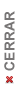
<style>
.page{position:relative;width:18px;height:90px;background:#ffffff}
.page>*{position:absolute;margin:0}
.t1{font:14px "Arial-BoldMT";color:#787676}
</style>
<div class="page">
<p class="t1" style="left:4px;top:11px;width:11px;height:60px;rotate:-90deg">CERRAR</p>
</div>
